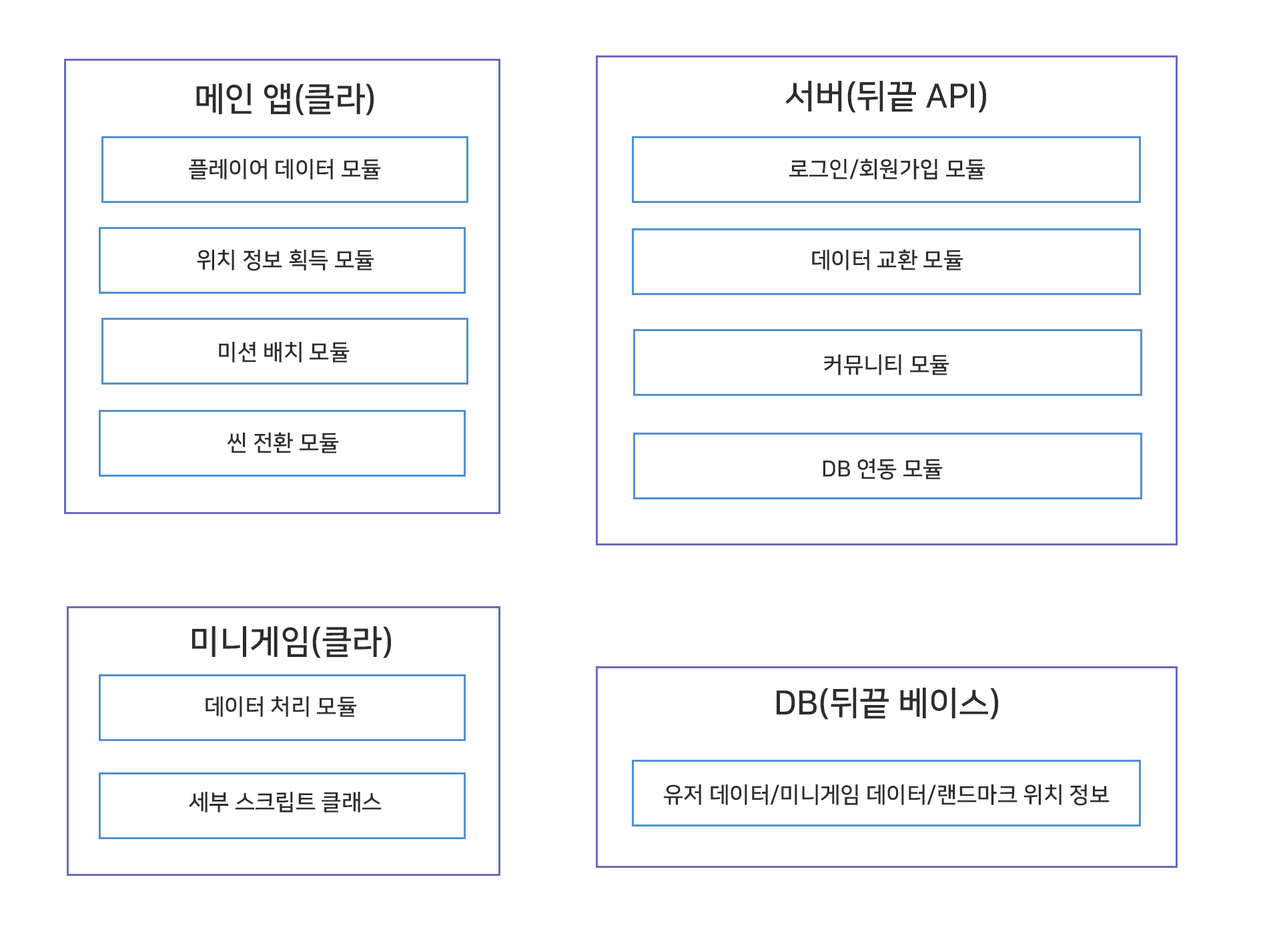
<style>
.page{position:relative;width:1261px;height:946px;background:#ffffff}
.page>*{position:absolute;margin:0}
.t1{font:33.4px "NanumSquareB";color:#2d2d2d}
.t2{font:22.2px "NanumSquareB";color:#2d2d2d}
</style>
<div class="page">
<p class="t1" style="left:196px;top:83px;width:178px;height:32px">메인 앱(클라)</p>
<p class="t1" style="left:785px;top:81px;width:201px;height:32px">서버(뒤끝 API)</p>
<p class="t2" style="left:189px;top:159px;width:192px;height:20px">플레이어 데이터 모듈</p>
<p class="t2" style="left:789px;top:158px;width:197px;height:21px">로그인/회원가입 모듈</p>
<p class="t2" style="left:197px;top:249px;width:177px;height:22px">위치 정보 획득 모듈</p>
<p class="t2" style="left:812px;top:249px;width:152px;height:21px">데이터 교환 모듈</p>
<p class="t2" style="left:219px;top:342px;width:131px;height:20px">미션 배치 모듈</p>
<p class="t2" style="left:824px;top:354px;width:126px;height:21px">커뮤니티 모듈</p>
<p class="t2" style="left:227px;top:432px;width:112px;height:21px">씬 전환 모듈</p>
<p class="t2" style="left:823px;top:458px;width:120px;height:22px">DB 연동 모듈</p>
<p class="t1" style="left:192px;top:626px;width:199px;height:32px">미니게임(클라)</p>
<p class="t1" style="left:777px;top:687px;width:221px;height:32px">DB(뒤끝 베이스)</p>
<p class="t2" style="left:206px;top:696px;width:151px;height:21px">데이터 처리 모듈</p>
<p class="t2" style="left:664px;top:784px;width:446px;height:21px">유저 데이터/미니게임 데이터/랜드마크 위치 정보</p>
<p class="t2" style="left:189px;top:791px;width:193px;height:21px">세부 스크립트 클래스</p>
</div>
